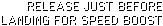
<style>
.page{position:relative;width:163px;height:26px;background:#ffffff}
.page>*{position:absolute;margin:0}
.t1{font:12px "Geneva";color:#000000}
</style>
<div class="page">
<p class="t1" style="left:2px;top:2px;width:160px;height:23px;text-align:right">RELEASE JUST BEFORE<br>LANDING FOR SPEED BOOST</p>
</div>
